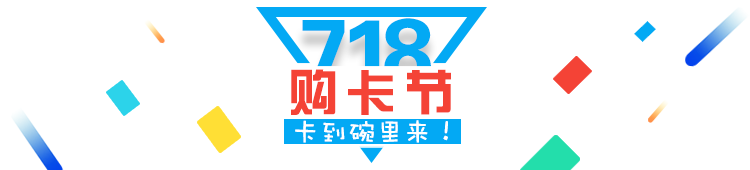
<style>
.page{position:relative;width:750px;height:170px;background:#ffffff}
.page>*{position:absolute;margin:0}
.t1{font:92.7px "FZZYJW--GB1-0";color:#03a9f4;text-transform:uppercase}
.t2{font:50px "FZZYJW--GB1-0";letter-spacing:0.16em;color:#f44336;text-transform:uppercase}
.t3{font:28px "DFWaWaSC-W5";color:#ffffff;text-transform:uppercase}
</style>
<div class="page">
<p class="t1" style="left:302px;top:20px;width:43px;height:65px">7</p>
<p class="t1" style="left:349px;top:20px;width:31px;height:65px">1</p>
<p class="t1" style="left:384px;top:18px;width:47px;height:67px">8</p>
<p class="t2" style="left:291px;top:69px;width:160px;height:46px">购卡节</p>
<p class="t3" style="left:295px;top:120px;width:153px;height:23px">卡到碗里来！</p>
</div>
